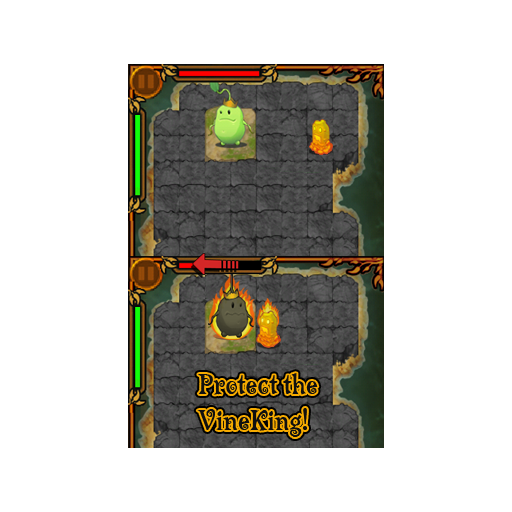
<style>
.page{position:relative;width:512px;height:512px;background:#ffffff}
.page>*{position:absolute;margin:0}
.t1{font:30px "LambadaLetPlain";color:#101010}
</style>
<div class="page">
<p class="t1" style="left:197px;top:373px;width:121px;height:64px">Protect the<br>VineKing!</p>
</div>
